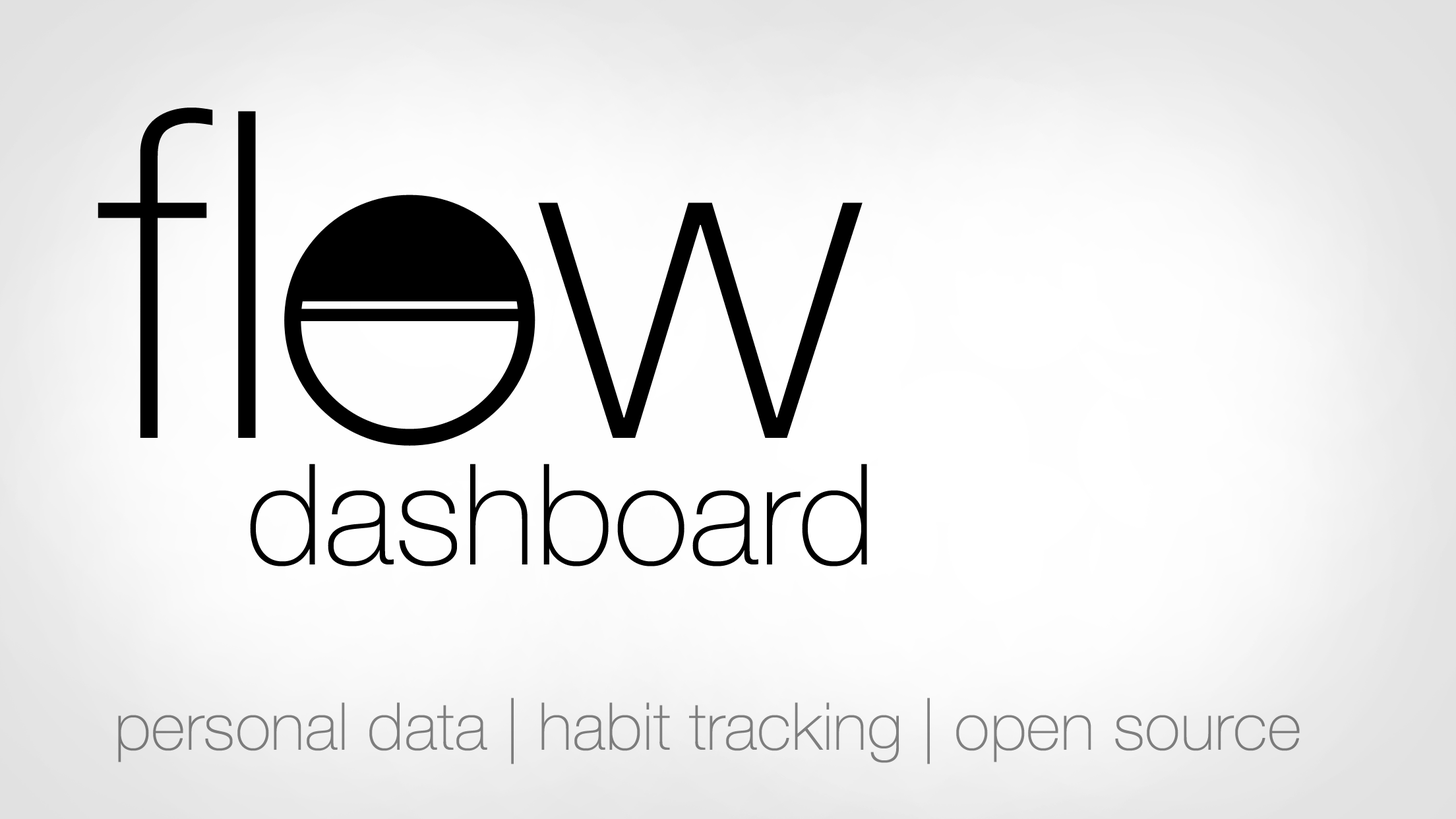
<style>
.page{position:relative;width:1456px;height:819px}
.page>*{position:absolute;margin:0}
.t1{font:457.3px "HelveticaNeue-Thin";color:#000000}
.t2{font:140.6px "HelveticaNeue-Thin";color:#000000}
.t3{font:66px "HelveticaNeue-Thin";color:#7e7e7e}
</style>
<div class="page">
<p class="t1" style="left:98px;top:107px;width:765px;height:331px">fl  w</p>
<p class="t2" style="left:250px;top:464px;width:617px;height:102px">dashboard</p>
<p class="t3" style="left:118px;top:698px;width:1182px;height:66px">personal data | habit tracking | open source</p>
</div>
